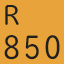
<style>
.page{position:relative;width:64px;height:64px;background:#e8a43a}
.page>*{position:absolute;margin:0}
.t1{font:33px/30.5px "TBChibiRGoPlusKPro-Regular";letter-spacing:0.1em;color:#202020;scale:0.86 1}
.t2{font:28.4px/30.5px "TBChibiRGoPlusKPro-Regular";color:#202020;scale:0.96 1}
</style>
<div class="page">
<p class="t1" style="left:4px;top:5px;width:56px;height:55px"><span class="t2">R<br></span>850</p>
</div>
